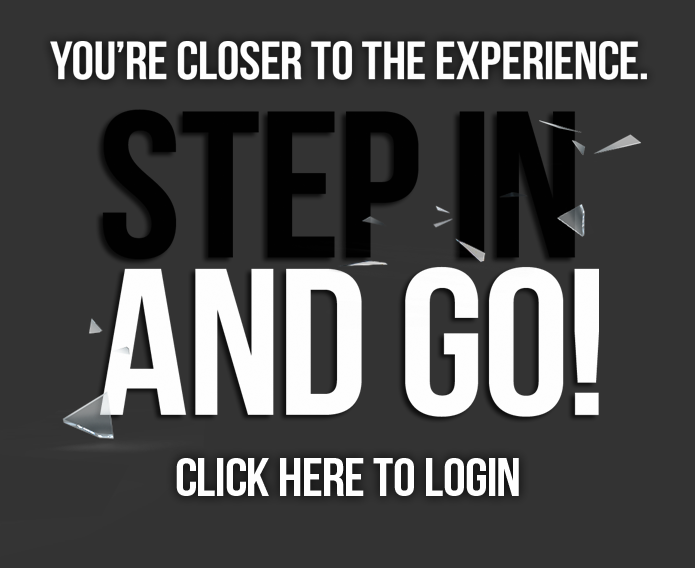
<style>
.page{position:relative;width:695px;height:568px;background:#333333}
.page>*{position:absolute;margin:0}
.t1{font:53.9px "BebasNeue";letter-spacing:-0.01em;color:#fefefe;scale:1.07 1}
.t2{font:208.3px/157.5px "BebasNeue";letter-spacing:-0.01em;color:#010101;scale:1.07 1}
.t3{font:208.3px/157.5px "BebasNeue";letter-spacing:-0.01em;color:#fefefe;scale:1.07 1}
</style>
<div class="page">
<p class="t1" style="left:50px;top:41px;width:597px;height:39px">you’re closer to the experience.</p>
<p class="t2" style="left:100px;top:109px;width:499px;height:308px">STEP IN <br><span class="t3">AND GO!</span></p>
<p class="t1" style="left:176px;top:458px;width:343px;height:38px">CLICK HERE TO LOGIN</p>
</div>
